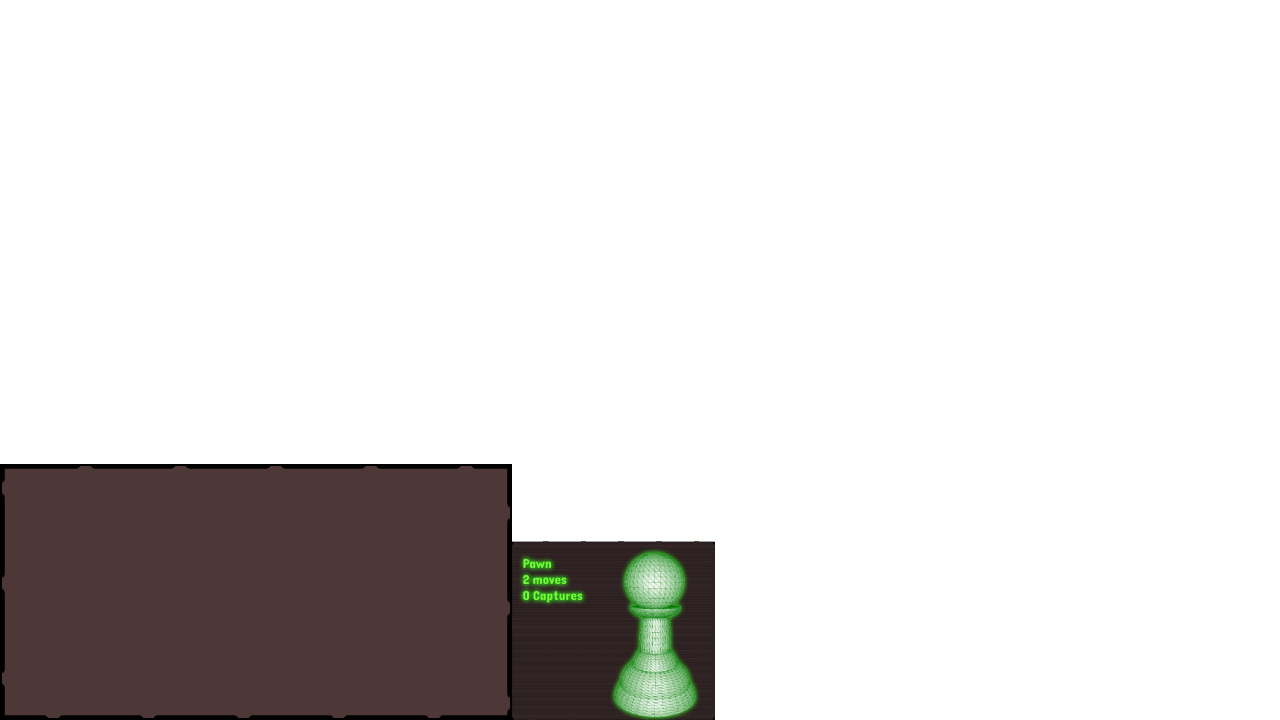
<style>
.page{position:relative;width:1280px;height:720px;background:#ffffff}
.page>*{position:absolute;margin:0}
.t1{font:13px "Dangrek-Regular";color:#6bff31}
</style>
<div class="page">
<p class="t1" style="left:523px;top:559px;width:60px;height:44px">Pawn<br>2 moves<br>0 Captures</p>
</div>
